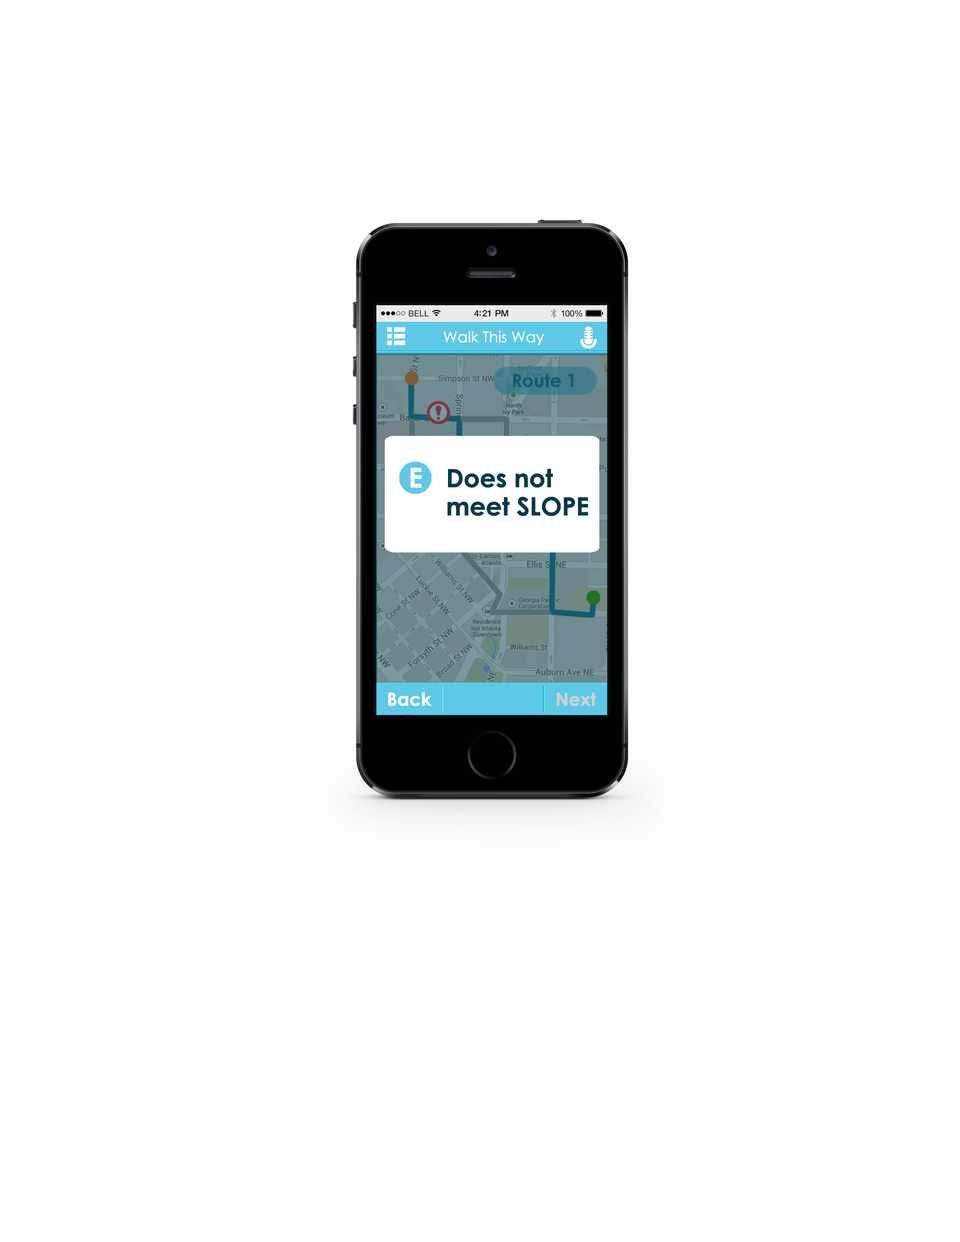
<style>
.page{position:relative;width:960px;height:1242px;background:#ffffff}
.page>*{position:absolute;margin:0}
.t1{font:15px "CenturyGothic";letter-spacing:-0.025em;color:#ffffff;font-weight:bold}
.t2{font:18px "CenturyGothic-Bold";letter-spacing:-0.025em;color:#125c70;font-weight:bold}
.t3{font:27.1px "CenturyGothic-Bold";letter-spacing:-0.025em;color:#ffffff;font-weight:bold}
.t4{font:25.1px/28.2px "CenturyGothic-Bold";letter-spacing:-0.025em;color:#053a48;font-weight:bold}
.t5{font:18.1px "CenturyGothic-Bold";letter-spacing:-0.025em;color:#ffffff;font-weight:bold}
.t6{font:18.1px "CenturyGothic-Bold";letter-spacing:-0.025em;color:#d1d1d1;font-weight:bold}
</style>
<div class="page">
<p class="t1" style="left:443px;top:331px;width:101px;height:15px">Walk This Way</p>
<p class="t2" style="left:513px;top:374px;width:60px;height:14px">Route 1</p>
<p class="t3" style="left:410px;top:468px;width:12px;height:20px">E</p>
<p class="t4" style="left:447px;top:469px;width:141px;height:47px">Does not <br>meet SLOPE</p>
<p class="t5" style="left:388px;top:692px;width:44px;height:14px">Back</p>
<p class="t6" style="left:557px;top:693px;width:39px;height:13px">Next</p>
</div>
